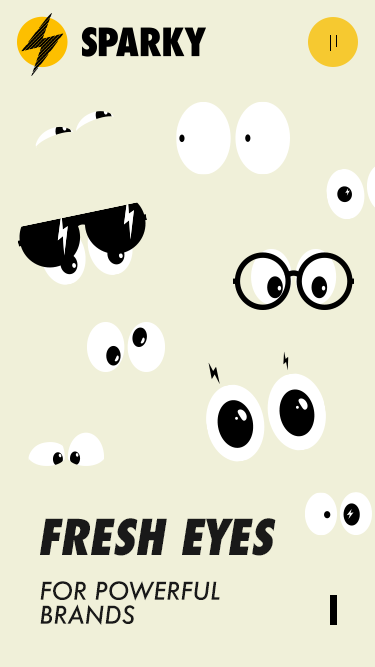
<style>
.page{position:relative;width:375px;height:667px;background:#f0f0d9}
.page>*{position:absolute;margin:0}
.t1{font:48px "Futura-CondExtraBoldObl";color:#191919;text-transform:uppercase}
.t2{font:24px/24px "Futura-MediumItalic";color:#191919}
</style>
<div class="page">
<p class="t1" style="left:40px;top:518px;width:236px;height:38px">fresh eyes</p>
<p class="t2" style="left:40px;top:581px;width:180px;height:44px">FOR POWERFUL <br>BRANDS</p>
</div>
